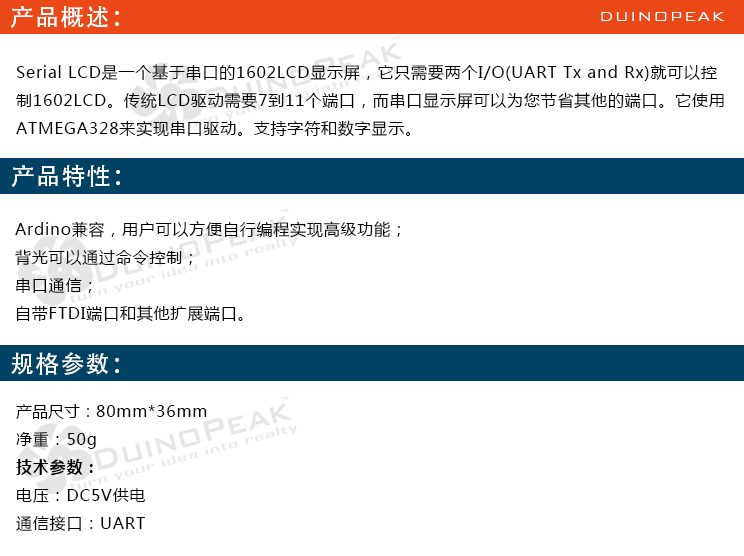
<style>
.page{position:relative;width:744px;height:556px;background:#ffffff}
.page>*{position:absolute;margin:0}
.t1{font:24px "AdobeHeitiStd-Regular";letter-spacing:0.05em;color:#ffffff}
.t2{font:18px "BankGothicBT-Light";letter-spacing:0.05em;color:#ffffff}
.t3{font:16px "MicrosoftYaHei";letter-spacing:0.05em;color:#000000}
.t4{font:16px "MicrosoftYaHei";color:#000000}
.t5{font:16px "MicrosoftYaHei-Bold";letter-spacing:0.05em;color:#000000}
</style>
<div class="page">
<p class="t1" style="left:10px;top:6px;width:109px;height:23px">产品概述：</p>
<p class="t2" style="left:601px;top:12px;width:124px;height:9px">DUINOPEAK</p>
<p class="t3" style="left:16px;top:64px;width:708px;height:73px">Serial LCD是一个基于串口的1602LCD显示屏，它只需要两个I/O(UART Tx and Rx)就可以控<br>制1602LCD。传统LCD驱动需要7到11个端口，而串口显示屏可以为您节省其他的端口。它使用<br>ATMEGA328来实现串口驱动。支持字符和数字显示。</p>
<p class="t1" style="left:11px;top:164px;width:109px;height:24px">产品特性：</p>
<p class="t3" style="left:15px;top:221px;width:385px;height:101px">Ardino兼容，用户可以方便自行编程实现高级功能；<br>背光可以通过命令控制；<br>串口通信；<br>自带FTDI端口和其他扩展端口。</p>
<p class="t1" style="left:11px;top:352px;width:108px;height:23px">规格参数：</p>
<p class="t3" style="left:16px;top:404px;width:191px;height:127px"><span class="t4">产品尺寸：</span>80mm*36mm<br>净重：50g<br><span class="t5">技术参数：<br></span>电压：DC5V供电<br>通信接口：UART</p>
</div>
